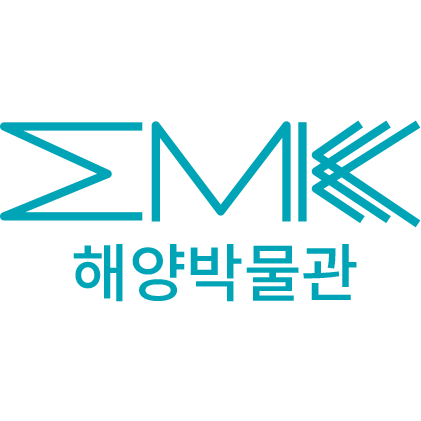
<style>
.page{position:relative;width:421px;height:421px;background:#ffffff}
.page>*{position:absolute;margin:0}
.t1{font:62.5px "NotoSansKR-Medium";color:#00a4b7}
</style>
<div class="page">
<p class="t1" style="left:73px;top:244px;width:284px;height:58px">해양박물관</p>
</div>
